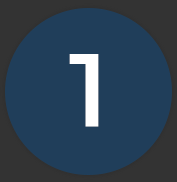
<style>
.page{position:relative;width:177px;height:182px;background:#203e5a}
.page>*{position:absolute;margin:0}
.t1{font:100px "Montserrat-Medium";color:#ffffff;font-weight:bold}
</style>
<div class="page">
<p class="t1" style="left:69px;top:54px;width:30px;height:73px">1</p>
</div>
